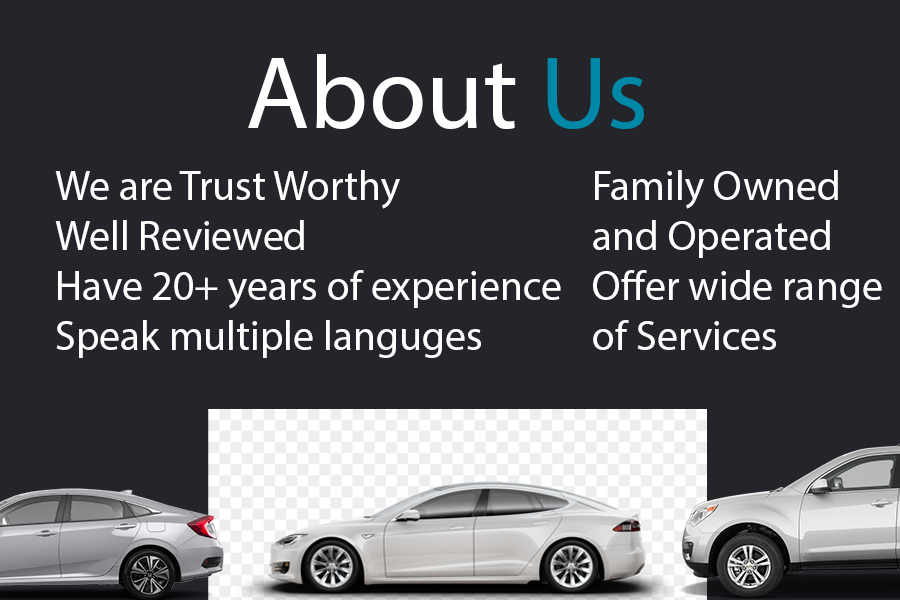
<style>
.page{position:relative;width:900px;height:600px;background:#24252a}
.page>*{position:absolute;margin:0}
.t1{font:104.2px "MyriadPro-Regular";color:#ffffff}
.t2{font:104.2px "MyriadPro-Regular";color:#0088a9}
.t3{font:41.7px "MyriadPro-Regular";color:#ffffff}
</style>
<div class="page">
<p class="t1" style="left:248px;top:54px;width:396px;height:76px">About <span class="t2">Us</span></p>
<p class="t3" style="left:55px;top:170px;width:506px;height:188px">We are Trust Worthy<br>Well Reviewed<br>Have 20+ years of experience<br>Speak multiple languges</p>
<p class="t3" style="left:593px;top:170px;width:289px;height:180px">Family Owned <br>and Operated<br>Offer wide range<br>of Services</p>
</div>
